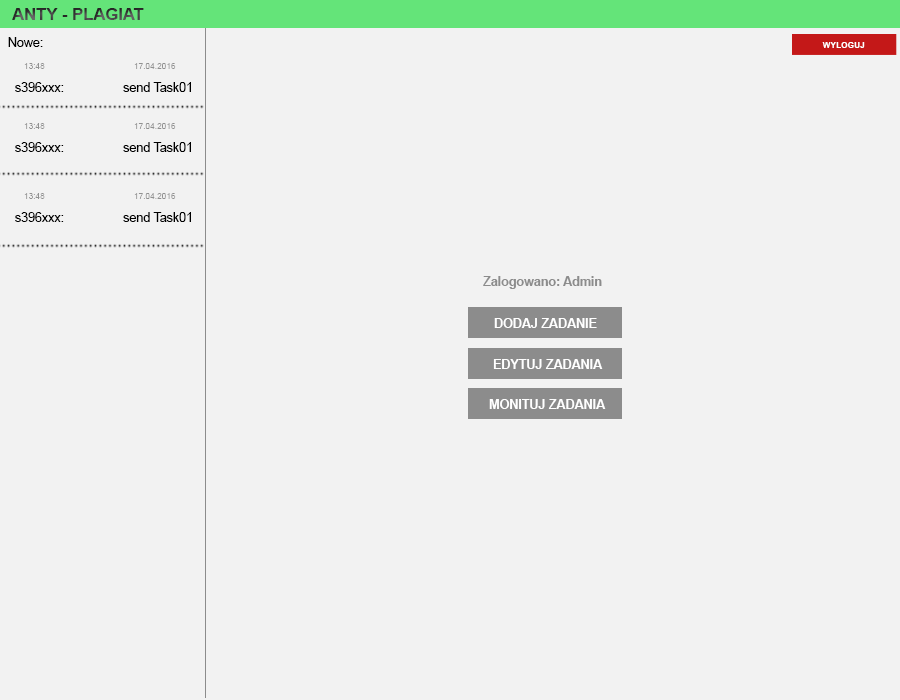
<style>
.page{position:relative;width:900px;height:700px;background:#f2f2f2}
.page>*{position:absolute;margin:0}
.t1{font:16.7px "Arial-BoldMT"}
.t2{font:12.5px "ArialMT";color:#000000}
.t3{font:8.3px "Arial-BoldMT";color:#ffffff}
.t4{font:8.3px "ArialMT";color:#919191}
.t5{font:12.5px "Arial-BoldMT";color:#8c8c8c}
.t6{font:12.5px "Arial-BoldMT";color:#ffffff}
</style>
<div class="page">
<p class="t1" style="left:12px;top:8px;width:132px;height:12px">ANTY - PLAGIAT</p>
<p class="t2" style="left:8px;top:37px;width:35px;height:10px">Nowe:</p>
<p class="t3" style="left:822px;top:42px;width:43px;height:6px">WYLOGUJ</p>
<p class="t4" style="left:24px;top:63px;width:21px;height:6px">13:48</p>
<p class="t4" style="left:134px;top:63px;width:42px;height:6px">17.04.2016</p>
<p class="t2" style="left:15px;top:82px;width:176px;height:10px">s396xxx:                 send Task01</p>
<p class="t4" style="left:24px;top:123px;width:21px;height:6px">13:48</p>
<p class="t4" style="left:134px;top:123px;width:42px;height:6px">17.04.2016</p>
<p class="t2" style="left:15px;top:142px;width:176px;height:10px">s396xxx:                 send Task01</p>
<p class="t4" style="left:24px;top:193px;width:21px;height:6px">13:48</p>
<p class="t4" style="left:134px;top:193px;width:42px;height:6px">17.04.2016</p>
<p class="t2" style="left:15px;top:212px;width:176px;height:10px">s396xxx:                 send Task01</p>
<p class="t5" style="left:483px;top:276px;width:119px;height:13px">Zalogowano: Admin</p>
<p class="t6" style="left:494px;top:318px;width:103px;height:10px">DODAJ ZADANIE</p>
<p class="t6" style="left:493px;top:359px;width:110px;height:10px">EDYTUJ ZADANIA</p>
<p class="t6" style="left:489px;top:399px;width:117px;height:10px">MONITUJ ZADANIA</p>
</div>
